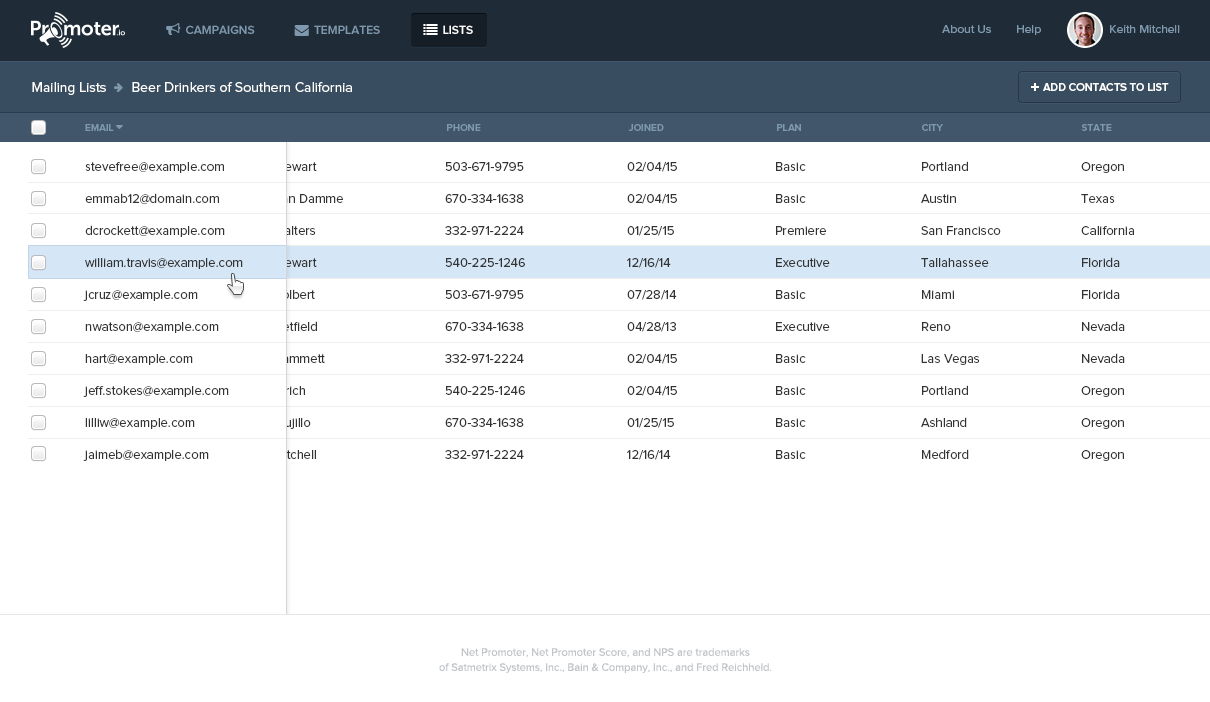
<style>
.page{position:relative;width:1210px;height:702px;background:#ffffff}
.page>*{position:absolute;margin:0}
.t1{font:12px "ProximaNova-Regular";color:#7e98ad}
.t2{font:11px "ProximaNova-Semibold";color:#ffffff;text-transform:uppercase}
.t3{font:10px "ProximaNova-Semibold";color:#7e98ad;text-transform:uppercase}
.t4{font:13px/32px "ProximaNova-Regular";color:#333333}
.t5{font:11px/15px "ProximaNova-Regular";color:#c1c4c8}
</style>
<div class="page">
<p class="t1" style="left:942px;top:25px;width:238px;height:10px">About Us        Help                      Keith Mitchell</p>
<p class="t2" style="left:1043px;top:83px;width:126px;height:8px">add contacts to list</p>
<p class="t3" style="left:447px;top:124px;width:34px;height:7px">phone</p>
<p class="t3" style="left:628px;top:124px;width:36px;height:7px">Joined</p>
<p class="t3" style="left:777px;top:124px;width:24px;height:7px">plan</p>
<p class="t3" style="left:922px;top:124px;width:21px;height:7px">City</p>
<p class="t3" style="left:1081px;top:124px;width:31px;height:7px">State</p>
<p class="t4" style="left:921px;top:161px;width:80px;height:298px">Portland<br>Austin<br>San Francisco<br>Tallahassee<br>Miami<br>Reno<br>Las Vegas<br>Portland<br>Ashland<br>Medford</p>
<p class="t4" style="left:83px;top:162px;width:160px;height:299px">stevefree@example.com<br>emmab12@domain.com<br>dcrockett@example.com<br>william.travis@example.com<br>jcruz@example.com<br>nwatson@example.com<br>hart@example.com<br>jeff.stokes@example.com<br>lilliw@example.com<br>jaimeb@example.com</p>
<p class="t4" style="left:273px;top:162px;width:70px;height:297px">Stewart<br>Van Damme<br>Walters<br>Stewart<br>Colbert<br>Hetfield<br>Hammett<br>Ulrich<br>Trujillo<br>Mitchell</p>
<p class="t4" style="left:445px;top:162px;width:80px;height:297px">503-671-9795<br>670-334-1638<br>332-971-2224<br>540-225-1246<br>503-671-9795<br>670-334-1638<br>332-971-2224<br>540-225-1246<br>670-334-1638<br>332-971-2224</p>
<p class="t4" style="left:627px;top:162px;width:50px;height:298px">02/04/15<br>02/04/15<br>01/25/15<br>12/16/14<br>07/28/14<br>04/28/13<br>02/04/15<br>02/04/15<br>01/25/15<br>12/16/14</p>
<p class="t4" style="left:776px;top:162px;width:54px;height:297px">Basic<br>Basic<br>Premiere<br>Executive<br>Basic<br>Executive<br>Basic<br>Basic<br>Basic<br>Basic</p>
<p class="t4" style="left:1081px;top:162px;width:53px;height:299px">Oregon<br>Texas<br>California<br>Florida<br>Florida<br>Nevada<br>Nevada<br>Oregon<br>Oregon<br>Oregon</p>
<p class="t5" style="left:439px;top:648px;width:333px;height:25px;text-align:center">Net Promoter, Net Promoter Score, and NPS are trademarks<br>of Satmetrix Systems, Inc., Bain &amp; Company, Inc., and Fred Reichheld.</p>
</div>
